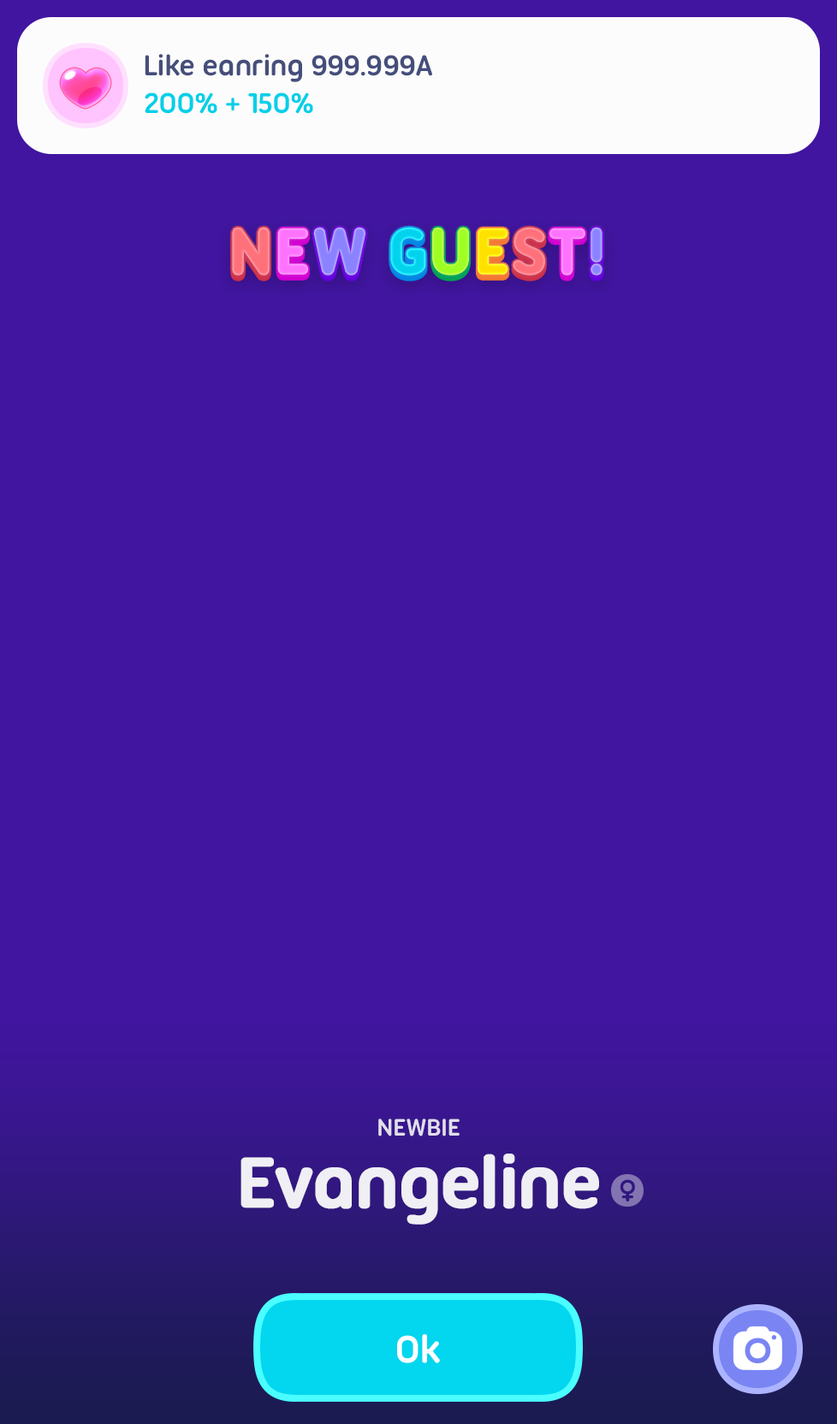
<style>
.page{position:relative;width:837px;height:1424px;background:#4115a0}
.page>*{position:absolute;margin:0}
.t1{font:30.8px "UbuntuTitling-Bold";letter-spacing:-0.025em;color:#454e7b}
.t2{font:30.8px "UbuntuTitling-Bold";letter-spacing:-0.025em;color:#00d0e9}
.t3{font:25.7px "UbuntuTitling-Bold";letter-spacing:-0.025em;color:#e1deeb;text-transform:uppercase}
.t4{font:77px "UbuntuTitling-Bold";letter-spacing:-0.025em;color:#ffffff;font-weight:bold}
.t5{font:41.1px "UbuntuTitling-Bold";letter-spacing:-0.025em;color:#ffffff}
</style>
<div class="page">
<p class="t1" style="left:145px;top:54px;width:287px;height:28px">Like eanring 999.999A</p>
<p class="t2" style="left:145px;top:92px;width:168px;height:22px">200% + 150%</p>
<p class="t3" style="left:378px;top:1119px;width:82px;height:18px">Newbie</p>
<p class="t4" style="left:241px;top:1154px;width:358px;height:71px;opacity:0.9">Evangeline</p>
<p class="t5" style="left:397px;top:1334px;width:43px;height:30px">Ok</p>
</div>
